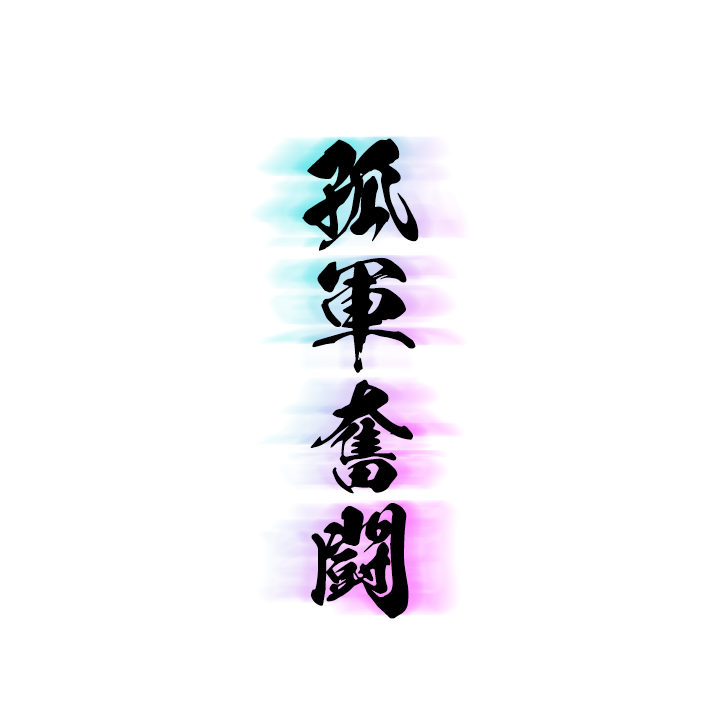
<style>
.page{position:relative;width:720px;height:720px;background:#ffffff}
.page>*{position:absolute;margin:0}
.t1{font:133.3px/122.2px "KsoKokuryuSou";color:#000000}
</style>
<div class="page">
<p class="t1" style="left:302px;top:138px;width:117px;height:481px;text-align:center">孤<br>軍<br>奮<br>闘</p>
</div>
